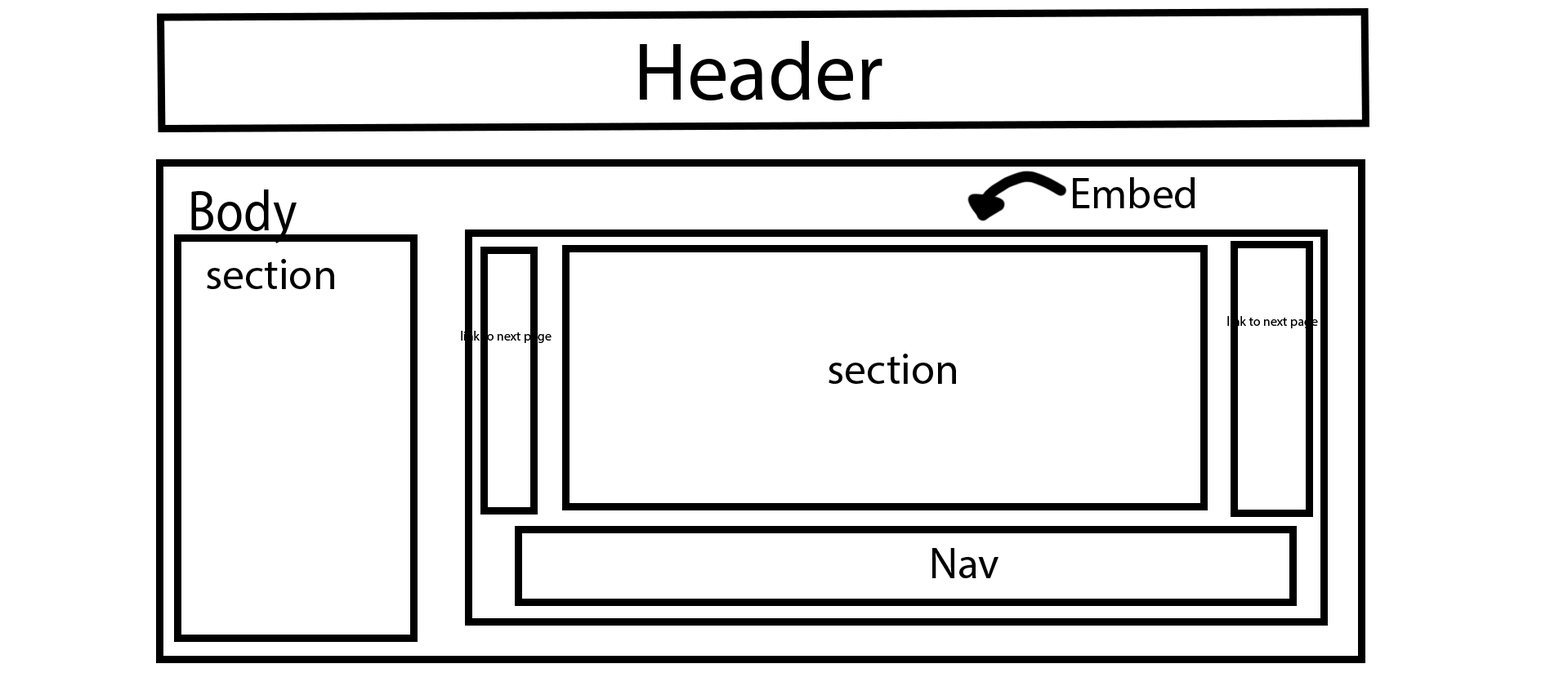
<style>
.page{position:relative;width:1568px;height:695px;background:#ffffff}
.page>*{position:absolute;margin:0}
.t1{font:82.5px "MyriadPro-Regular";color:#000000}
.t2{font:43.6px "MyriadPro-Regular";color:#000000}
.t3{font:57.7px "MyriadPro-Regular";color:#000000;scale:0.88 1}
.t4{font:13.1px "MyriadPro-Regular";color:#000000}
</style>
<div class="page">
<p class="t1" style="left:640px;top:41px;width:242px;height:60px">Header</p>
<p class="t2" style="left:1073px;top:177px;width:122px;height:31px">Embed</p>
<p class="t3" style="left:191px;top:190px;width:106px;height:53px">Body</p>
<p class="t2" style="left:207px;top:259px;width:127px;height:30px">section</p>
<p class="t4" style="left:1227px;top:316px;width:91px;height:12px">link to next page</p>
<p class="t4" style="left:461px;top:331px;width:91px;height:12px">link to next page</p>
<p class="t2" style="left:829px;top:354px;width:127px;height:30px">section</p>
<p class="t2" style="left:932px;top:548px;width:66px;height:31px">Nav</p>
</div>
